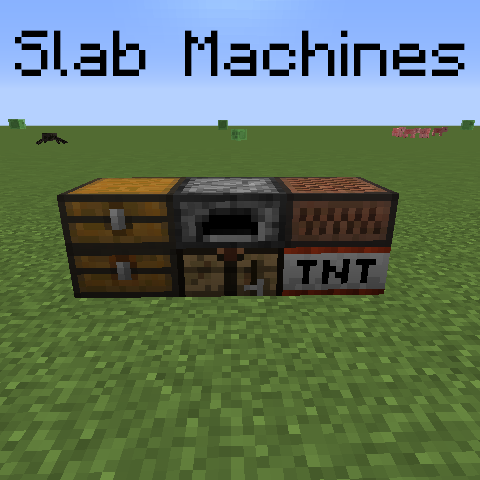
<style>
.page{position:relative;width:480px;height:480px}
.page>*{position:absolute;margin:0}
.t1{font:52px "Minecraftia";color:#000000}
</style>
<div class="page">
<p class="t1" style="left:15px;top:30px;width:450px;height:46px">Slab Machines</p>
</div>
